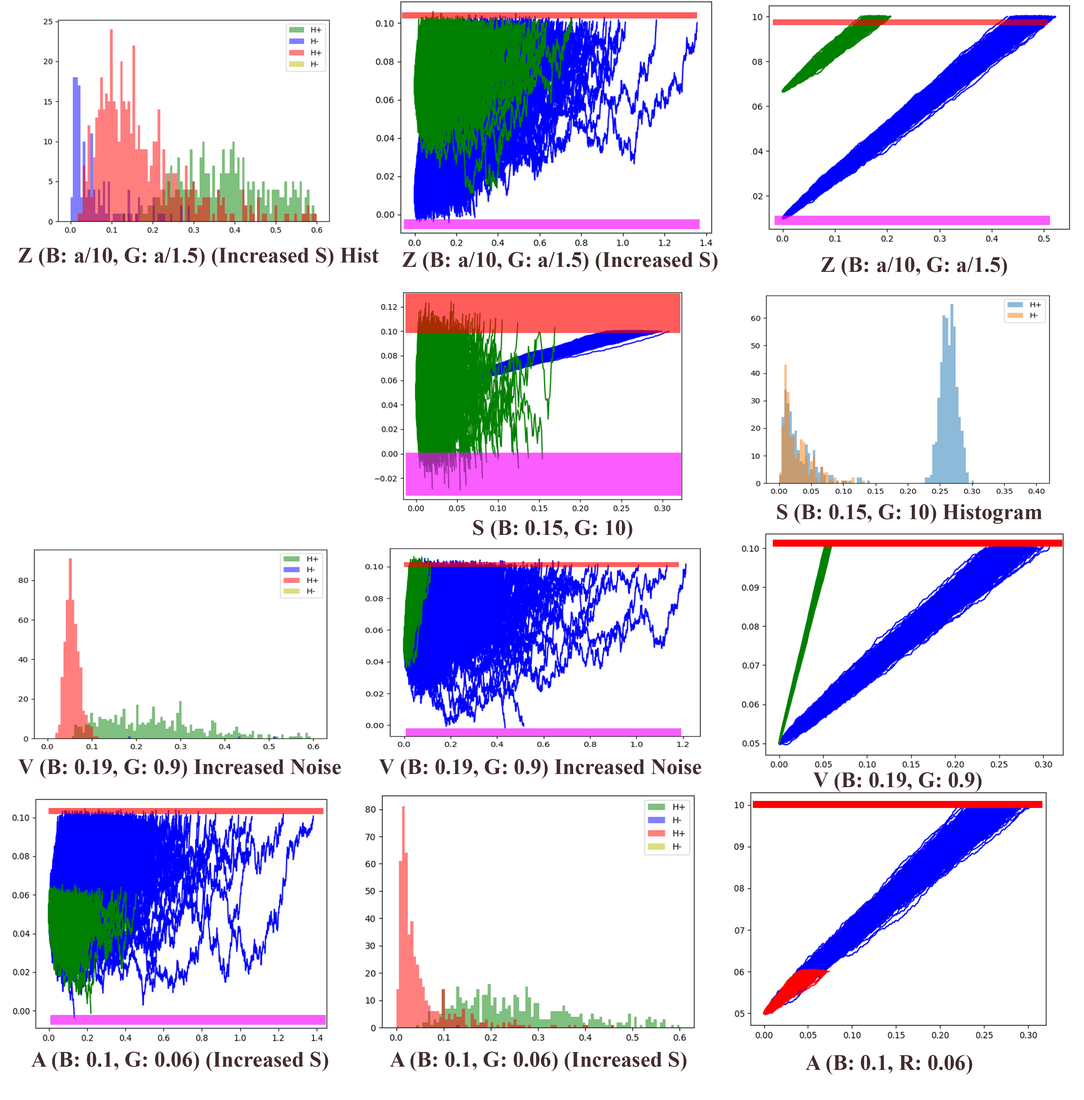
<style>
.page{position:relative;width:1084px;height:1100px;background:#ffffff}
.page>*{position:absolute;margin:0}
.t1{font:22px "TimesNewRomanPS-BoldMT";color:#422c2c}
</style>
<div class="page">
<p class="t1" style="left:18px;top:248px;width:361px;height:19px">Z (B: a/10, G: a/1.5) (Increased S) Hist</p>
<p class="t1" style="left:402px;top:252px;width:315px;height:20px">Z (B: a/10, G: a/1.5) (Increased S)</p>
<p class="t1" style="left:821px;top:257px;width:186px;height:20px">Z (B: a/10, G: a/1.5)</p>
<p class="t1" style="left:777px;top:504px;width:265px;height:20px">S (B: 0.15, G: 10) Histogram</p>
<p class="t1" style="left:473px;top:520px;width:159px;height:20px">S (B: 0.15, G: 10)</p>
<p class="t1" style="left:18px;top:759px;width:323px;height:20px">V (B: 0.19, G: 0.9) Increased Noise</p>
<p class="t1" style="left:379px;top:759px;width:322px;height:20px">V (B: 0.19, G: 0.9) Increased Noise</p>
<p class="t1" style="left:813px;top:772px;width:168px;height:20px">V (B: 0.19, G: 0.9)</p>
<p class="t1" style="left:31px;top:1052px;width:297px;height:20px">A (B: 0.1, G: 0.06) (Increased S)</p>
<p class="t1" style="left:390px;top:1052px;width:296px;height:20px">A (B: 0.1, G: 0.06) (Increased S)</p>
<p class="t1" style="left:805px;top:1055px;width:167px;height:20px">A (B: 0.1, R: 0.06)</p>
</div>
